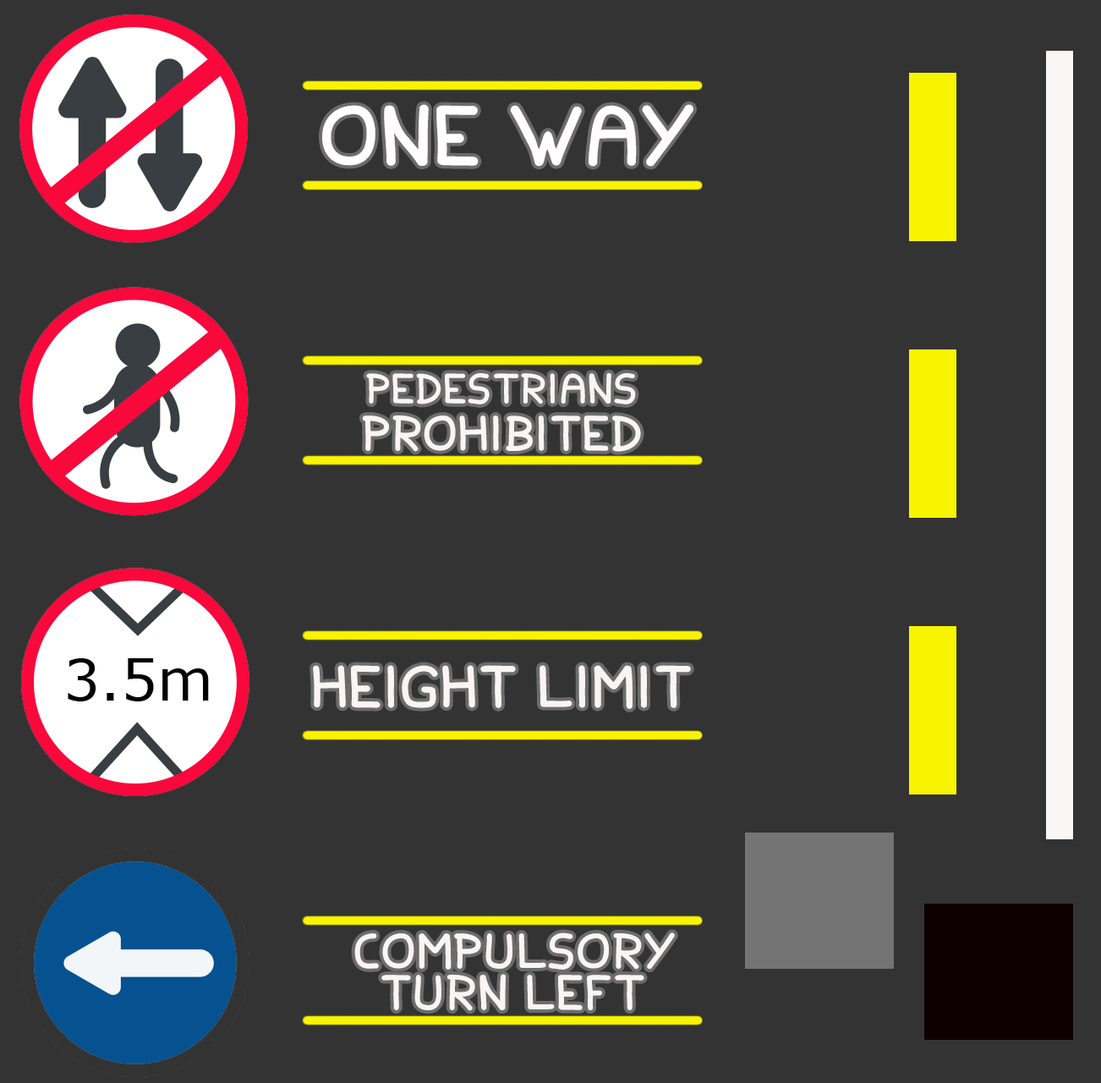
<style>
.page{position:relative;width:1101px;height:1083px;background:#333333}
.page>*{position:absolute;margin:0}
.t1{font:86.3px "FamilyandFriends";color:#fffdfd}
.t2{font:43.1px "FamilyandFriends";color:#faf4f4}
.t3{font:50.8px "FamilyandFriends";color:#faf4f4}
.t4{font:60.9px "FamilyandFriends";color:#faf4f4}
.t5{font:50.8px/41.4px "FamilyandFriends";color:#faf4f4}
</style>
<div class="page">
<p class="t1" style="left:322px;top:104px;width:372px;height:63px">ONE WAY</p>
<p class="t2" style="left:366px;top:373px;width:270px;height:31px">PEDESTRIANS</p>
<p class="t3" style="left:362px;top:415px;width:279px;height:37px">PROHIBITED</p>
<p class="t4" style="left:313px;top:665px;width:378px;height:44px">HEIGHT LIMIT</p>
<p class="t3" style="left:354px;top:932px;width:321px;height:79px;text-align:center">COMPULSORY<br><span class="t5">TURN LEFT</span></p>
</div>
